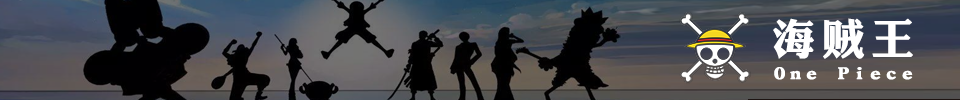
<style>
.page{position:relative;width:960px;height:100px}
.page>*{position:absolute;margin:0}
.t1{font:43px "DFLiJinHeiW8";letter-spacing:0.15em;color:#ffffff}
.t2{font:16.9px "DFLiJinHeiW8";letter-spacing:0.17em;color:#ffffff;scale:1.38 1}
</style>
<div class="page">
<p class="t1" style="left:773px;top:18px;width:140px;height:41px">海贼王</p>
<p class="t2" style="left:774px;top:67px;width:139px;height:13px">One Piece</p>
</div>
